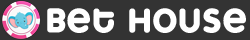
<style>
.page{position:relative;width:250px;height:40px;background:#333333}
.page>*{position:absolute;margin:0}
.t1{font:32px "Marshmallow-SuperPuff";letter-spacing:0.02em;color:#ffffff}
</style>
<div class="page">
<p class="t1" style="left:47px;top:8px;width:199px;height:25px">BET HOUSE</p>
</div>
